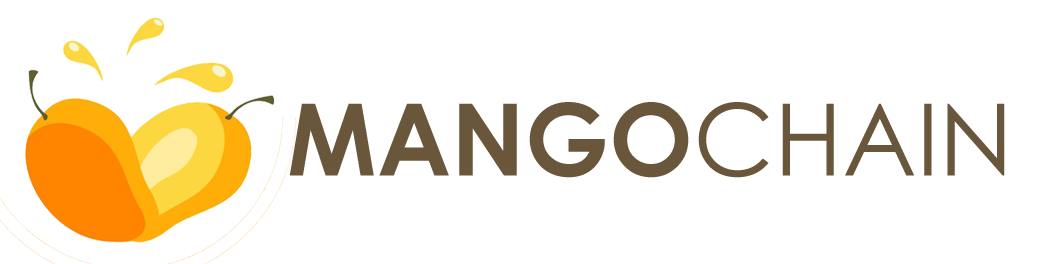
<style>
.page{position:relative;width:1044px;height:264px;background:#ffffff}
.page>*{position:absolute;margin:0}
.t1{font:100px "CenturyGothic-Bold";color:#6a573b}
.t2{font:100px "CenturyGothic";color:#6a573b}
</style>
<div class="page">
<p class="t1" style="left:289px;top:102px;width:716px;height:76px">MANGO<span class="t2">CHAIN</span></p>
</div>
